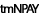
<style>
.page{position:relative;width:39px;height:16px;background:#ffffff}
.page>*{position:absolute;margin:0}
.t1{font:12px "MalgunGothicRegular";letter-spacing:-0.1em;color:#000000;font-weight:bold}
</style>
<div class="page">
<p class="t1" style="left:0px;top:4px;width:40px;height:9px">tmNPAY</p>
</div>
